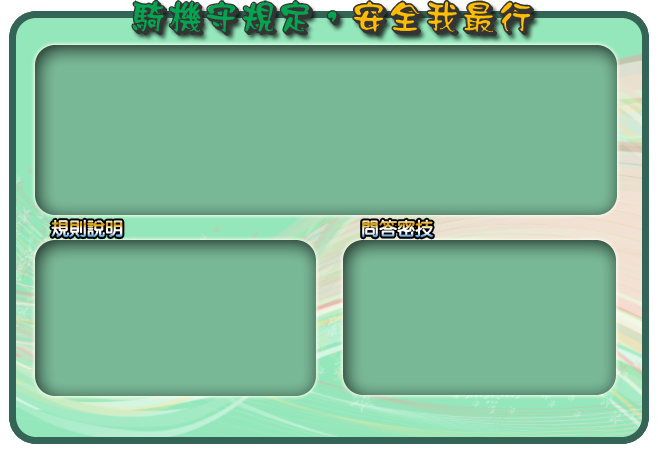
<style>
.page{position:relative;width:658px;height:450px;background:#79b897}
.page>*{position:absolute;margin:0}
.t1{font:36.7px "HanWangWCL03";color:#343434}
.t2{font:18px "HanWangYenHeavy"}
</style>
<div class="page">
<p class="t1" style="left:131px;top:0px;width:404px;height:36px">騎機守規定，安全我最行</p>
<p class="t2" style="left:51px;top:219px;width:72px;height:19px">規則說明</p>
<p class="t2" style="left:362px;top:219px;width:71px;height:19px">問答密技</p>
</div>
